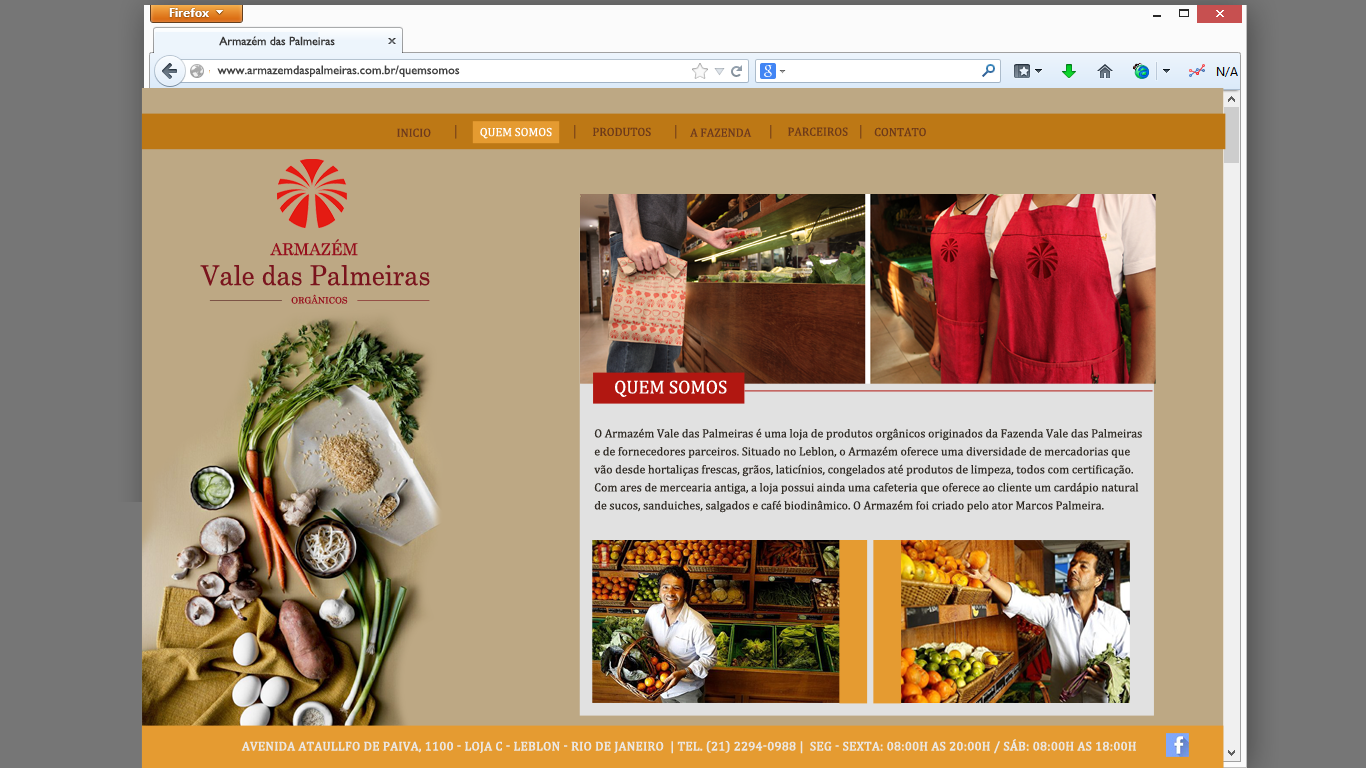
<style>
.page{position:relative;width:1366px;height:768px;background:#bda884}
.page>*{position:absolute;margin:0}
.t1{font:12px "GillSansMT";color:#373737}
.t2{font:12.4px "GillSansMT";color:#424242}
.t3{font:12px "Cambria";color:#6d3a1d}
.t4{font:12px "Cambria";color:#ffffff}
.t5{font:12px "Cambria";color:#6d3a19}
.t6{font:16.2px "Century";color:#96101d}
.t7{font:27.3px "Century";color:#7a141d;scale:0.94 1}
.t8{font:8.9px "Century";color:#96101d}
.t9{font:18.8px "Cambria";color:#ffffff}
.t10{font:12px/18px "Cambria";color:#312c26}
.t11{font:12.5px "Cambria";color:#ebe7e2;text-transform:uppercase;font-weight:bold}
</style>
<div class="page">
<p class="t1" style="left:219px;top:36px;width:116px;height:10px">Armazém das Palmeiras</p>
<p class="t2" style="left:217px;top:65px;width:243px;height:12px">www.armazemdaspalmeiras.com.br/quemsomos</p>
<p class="t3" style="left:397px;top:128px;width:34px;height:9px">INICIO</p>
<p class="t4" style="left:480px;top:127px;width:72px;height:12px">QUEM SOMOS</p>
<p class="t5" style="left:593px;top:127px;width:58px;height:9px">PRODUTOS</p>
<p class="t3" style="left:690px;top:128px;width:62px;height:9px">A FAZENDA</p>
<p class="t5" style="left:788px;top:127px;width:60px;height:9px">PARCEIROS</p>
<p class="t5" style="left:874px;top:127px;width:52px;height:10px">CONTATO</p>
<p class="t6" style="left:270px;top:239px;width:88px;height:17px">ARMAZÉM</p>
<p class="t7" style="left:200px;top:265px;width:230px;height:21px">Vale das Palmeiras</p>
<p class="t8" style="left:291px;top:294px;width:57px;height:10px">ORGÂNICOS</p>
<p class="t9" style="left:615px;top:380px;width:112px;height:17px">QUEM SOMOS</p>
<p class="t10" style="left:594px;top:428px;width:548px;height:85px;text-align:justify">O Armazém Vale das Palmeiras é uma loja de produtos orgânicos originados da Fazenda Vale das Palmeiras <br>e de fornecedores parceiros. Situado no Leblon, o Armazém oferece uma diversidade de mercadorias que <br>vão desde hortaliças frescas, grãos, laticínios, congelados até produtos de limpeza, todos com certificação. <br>Com ares de mercearia antiga, a loja possui ainda uma cafeteria que oferece ao cliente um cardápio natural <br>de sucos, sanduiches, salgados e café biodinâmico. O Armazém foi criado pelo ator Marcos Palmeira.</p>
<p class="t11" style="left:241px;top:739px;width:895px;height:15px">Avenida Ataullfo de Paiva, 1100 - Loja C - Leblon - Rio de Janeiro  | Tel. (21) 2294-0988 |  Seg - Sexta: 08:00h as 20:00h / Sáb: 08:00h as 18:00h</p>
</div>
